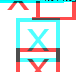
<style>
.page{position:relative;width:76px;height:72px;background:#ffffff}
.page>*{position:absolute;margin:0}
.t1{font:41px "Verdana"}
</style>
<div class="page">
<p class="t1" style="left:27px;top:27px;width:22px;height:22px">x</p>
</div>
